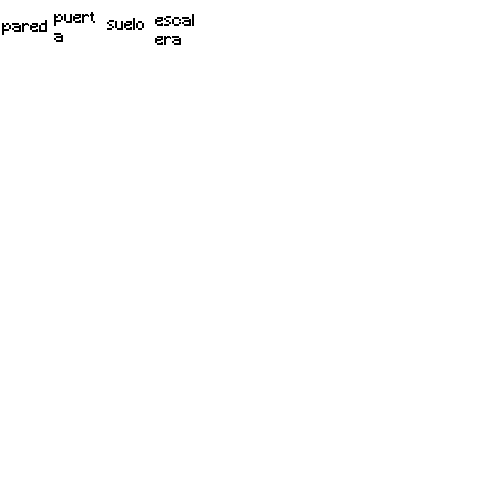
<style>
.page{position:relative;width:500px;height:500px;background:#ffffff}
.page>*{position:absolute;margin:0}
.t1{font:16px "Minecraft";color:#000000}
</style>
<div class="page">
<p class="t1" style="left:54px;top:12px;width:41px;height:30px">puert<br>a</p>
<p class="t1" style="left:155px;top:14px;width:39px;height:31px">escal<br>era</p>
<p class="t1" style="left:2px;top:20px;width:45px;height:15px">pared</p>
<p class="t1" style="left:107px;top:18px;width:37px;height:12px">suelo</p>
</div>
